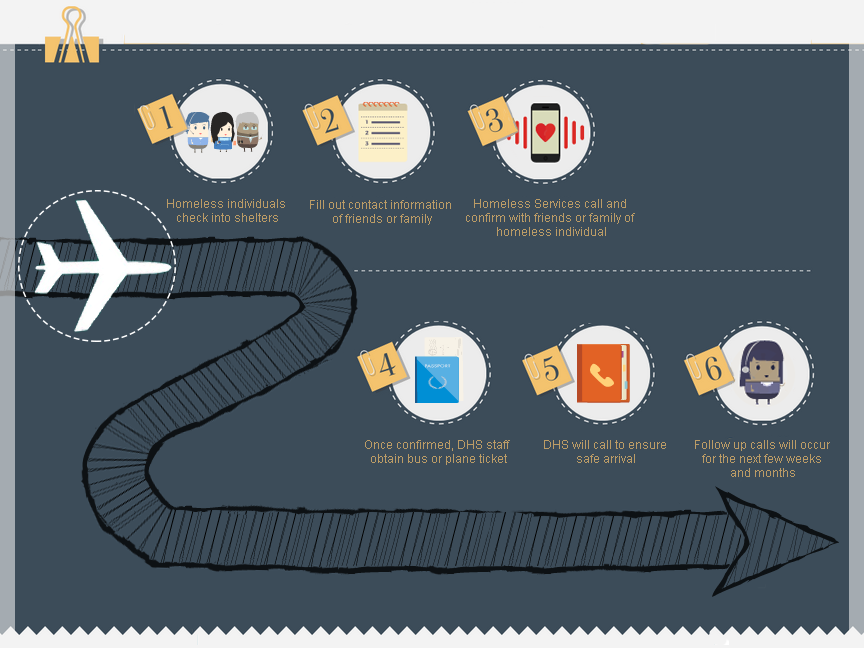
<style>
.page{position:relative;width:864px;height:648px;background:#3c4c59}
.page>*{position:absolute;margin:0}
.t1{font:12px "ArialMT";color:#bc9c66}
</style>
<div class="page">
<p class="t1" style="left:167px;top:199px;width:118px;height:23px;text-align:center">Homeless individuals <br>check into shelters</p>
<p class="t1" style="left:310px;top:200px;width:141px;height:25px;text-align:center">Fill out contact information <br>of friends or family</p>
<p class="t1" style="left:466px;top:199px;width:169px;height:37px;text-align:center">Homeless Services call and <br>confirm with friends or family of <br>homeless individual</p>
<p class="t1" style="left:365px;top:440px;width:145px;height:25px;text-align:center">Once confirmed, DHS staff <br>obtain bus or plane ticket</p>
<p class="t1" style="left:544px;top:440px;width:122px;height:23px;text-align:center">DHS will call to ensure <br>safe arrival</p>
<p class="t1" style="left:695px;top:440px;width:135px;height:37px;text-align:center">Follow up calls will occur <br>for the next few weeks <br>and months</p>
</div>
